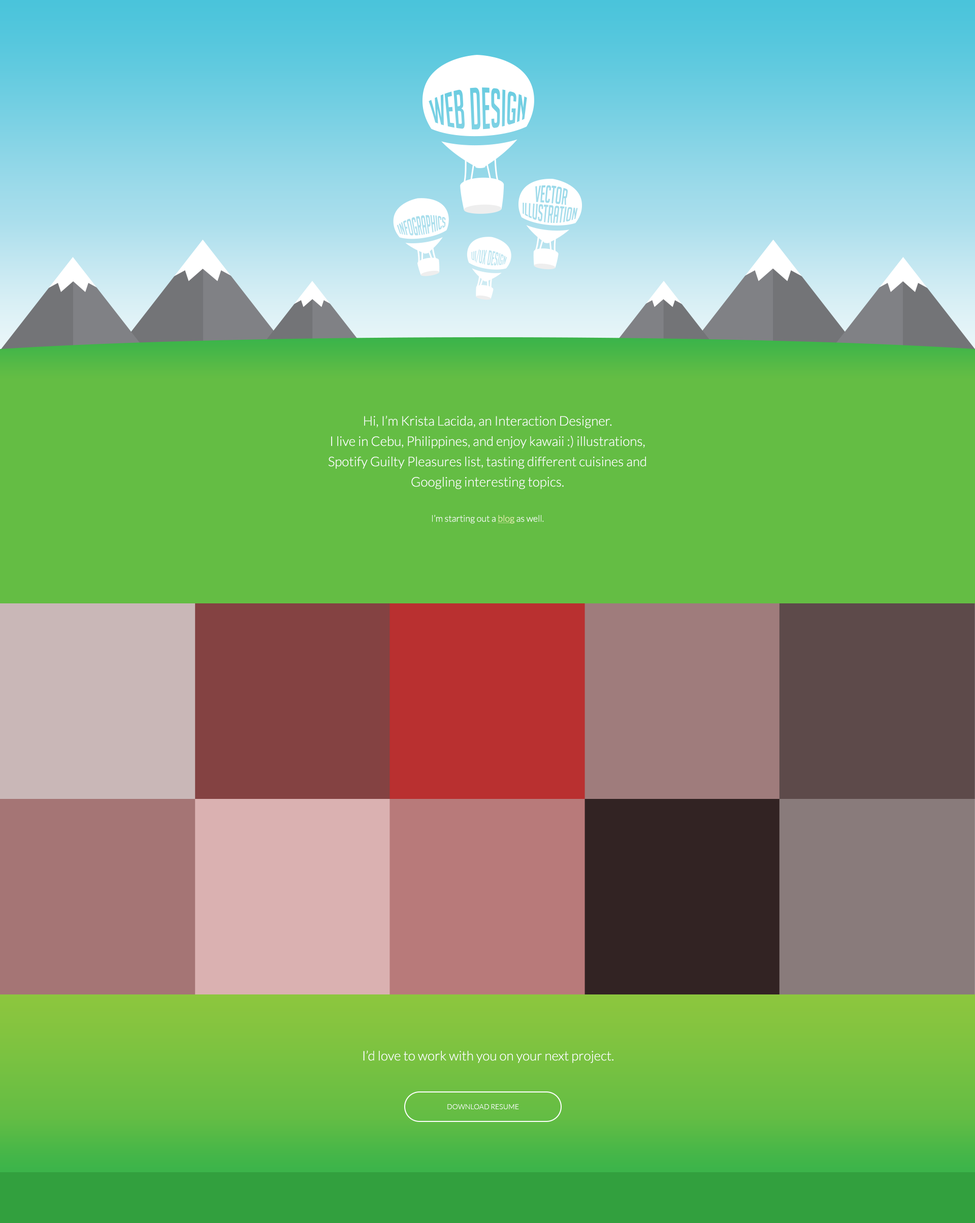
<style>
.page{position:relative;width:975px;height:1223px}
.page>*{position:absolute;margin:0}
.t1{font:13.2px/20.3px "Lato-Light";color:#ffffff}
.t2{font:9.1px "Lato-Light";color:#ffffff}
.t3{font:9.1px "Lato-Light";color:#f9f6be;text-decoration:underline}
.t4{font:13.2px "Lato-Light";color:#ffffff}
.t5{font:7.1px "Lato-Light";color:#ffffff;text-transform:uppercase}
</style>
<div class="page">
<p class="t1" style="left:328px;top:415px;width:318px;height:74px;text-align:center">Hi, I’m Krista Lacida, an Interaction Designer.<br>I live in Cebu, Philippines, and enjoy kawaii :) illustrations, Spotify Guilty Pleasures list, tasting different cuisines and Googling interesting topics.</p>
<p class="t2" style="left:432px;top:514px;width:112px;height:10px">I’m starting out a <span class="t3">blog</span> as well.</p>
<p class="t4" style="left:363px;top:1050px;width:250px;height:13px">I’d love to work with you on your next project.</p>
<p class="t5" style="left:447px;top:1104px;width:72px;height:5px">Download REsume</p>
</div>
